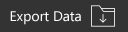
<style>
.page{position:relative;width:128px;height:32px;background:#333333}
.page>*{position:absolute;margin:0}
.t1{font:14px "SegoeUI";color:#ffffff}
</style>
<div class="page">
<p class="t1" style="left:10px;top:11px;width:71px;height:14px">Export Data</p>
</div>
